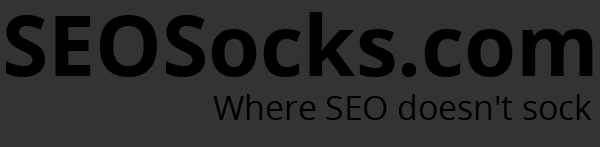
<style>
.page{position:relative;width:600px;height:147px;background:#333333}
.page>*{position:absolute;margin:0}
.t1{font:84px "OpenSans-Bold";color:#000000}
.t2{font:33.6px "OpenSans";color:#000000}
</style>
<div class="page">
<p class="t1" style="left:5px;top:12px;width:588px;height:65px">SEOSocks.com</p>
<p class="t2" style="left:213px;top:94px;width:379px;height:26px">Where SEO doesn't sock</p>
</div>
